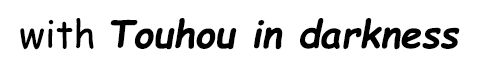
<style>
.page{position:relative;width:479px;height:72px;background:#ffffff}
.page>*{position:absolute;margin:0}
.t1{font:38px "ComicSansMS-BoldItalic";color:#000000}
.t2{font:38px "ComicSansMS";color:#000000}
</style>
<div class="page">
<p class="t1" style="left:20px;top:17px;width:440px;height:33px"><span class="t2">with </span>Touhou in darkness</p>
</div>
